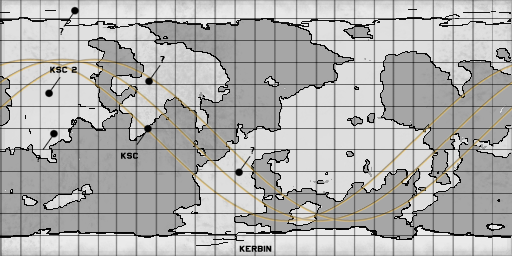
<style>
.page{position:relative;width:512px;height:256px}
.page>*{position:absolute;margin:0}
.t1{font:9.6px "MyriadPro-Regular";color:#000000;scale:1.25 1}
.t2{font:9.6px "AmarilloUSAF";color:#000000;scale:1.25 1}
</style>
<div class="page">
<p class="t1" style="left:59px;top:28px;width:5px;height:7px">?</p>
<p class="t1" style="left:160px;top:56px;width:5px;height:7px">?</p>
<p class="t1" style="left:160px;top:56px;width:5px;height:7px">?</p>
<p class="t2" style="left:50px;top:66px;width:27px;height:7px">KSc 2</p>
<p class="t1" style="left:250px;top:147px;width:5px;height:7px">?</p>
<p class="t1" style="left:36px;top:155px;width:5px;height:7px">?</p>
<p class="t2" style="left:121px;top:152px;width:17px;height:7px">KSc</p>
<p class="t2" style="left:239px;top:245px;width:33px;height:7px">Kerbin</p>
</div>
